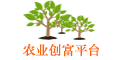
<style>
.page{position:relative;width:120px;height:60px;background:#ffffff}
.page>*{position:absolute;margin:0}
.t1{font:13px "STZhongsong";color:#fe6601}
</style>
<div class="page">
<p class="t1" style="left:22px;top:43px;width:77px;height:14px">农业创富平台</p>
</div>
